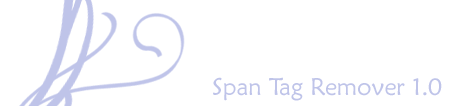
<style>
.page{position:relative;width:453px;height:106px;background:#ffffff}
.page>*{position:absolute;margin:0}
.t1{font:24px "MaiandraGD-Regular";color:#bfc4e9}
</style>
<div class="page">
<p class="t1" style="left:213px;top:77px;width:229px;height:24px">Span Tag Remover 1.0</p>
</div>
